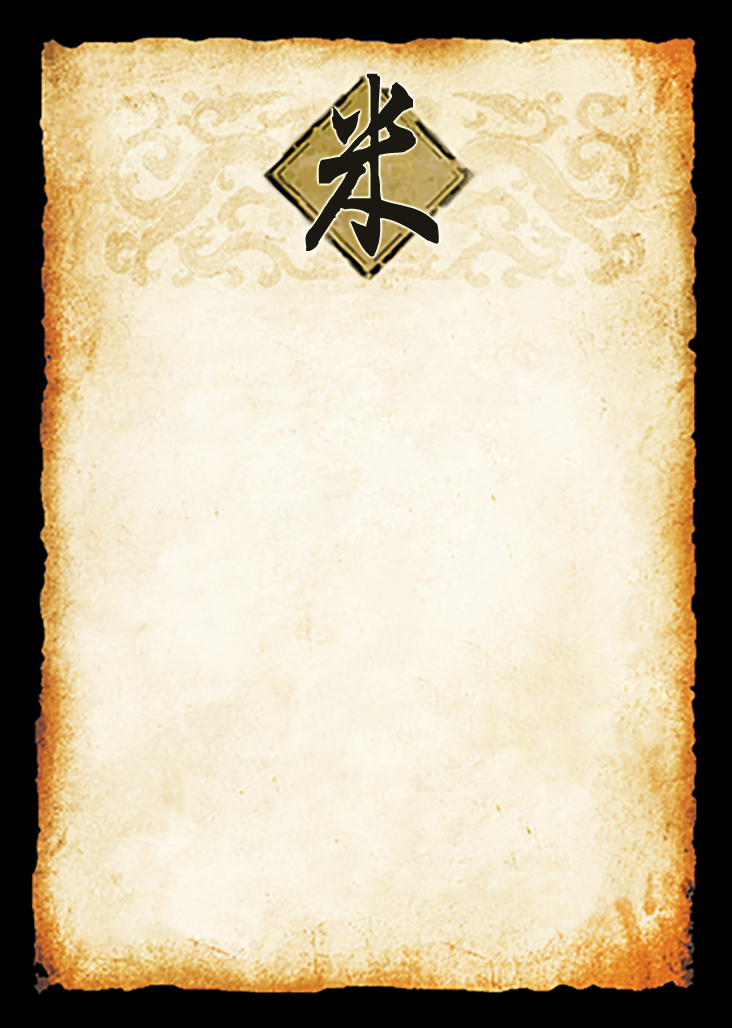
<style>
.page{position:relative;width:732px;height:1028px}
.page>*{position:absolute;margin:0}
.t1{font:183.3px "ª÷±ö¯ó¦æ®Ñ";color:#1b1911;font-weight:bold}
</style>
<div class="page">
<p class="t1" style="left:305px;top:73px;width:134px;height:184px">米</p>
</div>
